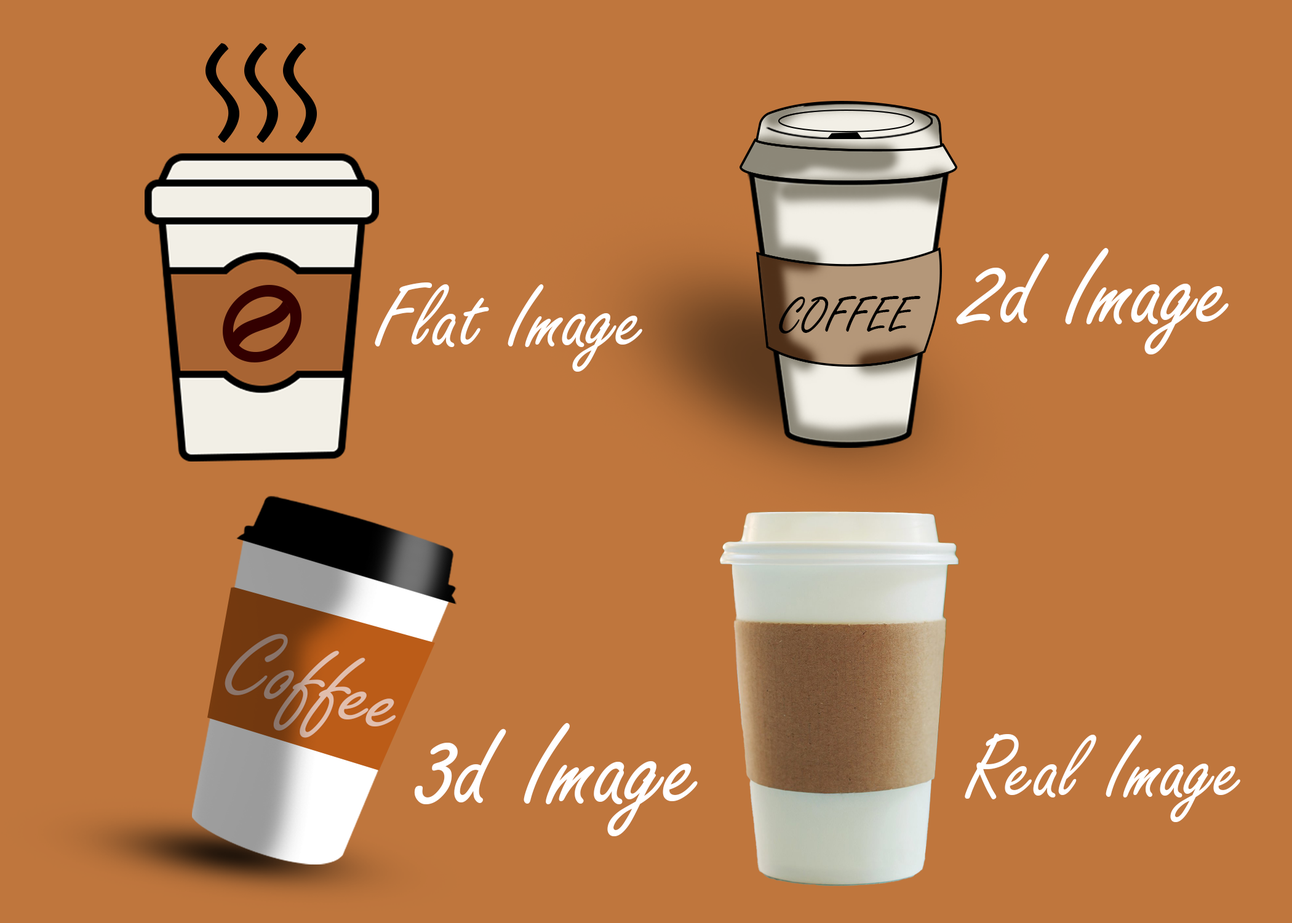
<style>
.page{position:relative;width:1292px;height:923px;background:#bf763d}
.page>*{position:absolute;margin:0}
.t1{font:118.3px "FreestyleScript-Regular";color:#ffffff}
.t2{font:97.2px "FreestyleScript-Regular";color:#ffffff}
.t3{font:53.4px "FreestyleScript-Regular";color:#000000}
.t4{font:125.7px "FreestyleScript-Regular";color:#ffffff}
</style>
<div class="page">
<p class="t1" style="left:956px;top:248px;width:273px;height:106px">2d Image</p>
<p class="t2" style="left:375px;top:282px;width:267px;height:90px">Flat Image</p>
<p class="t3" style="left:779px;top:296px;width:141px;height:37px">COFFEE</p>
<p class="t4" style="left:414px;top:723px;width:284px;height:113px">3d Image</p>
<p class="t2" style="left:965px;top:733px;width:275px;height:89px">Real Image</p>
</div>
